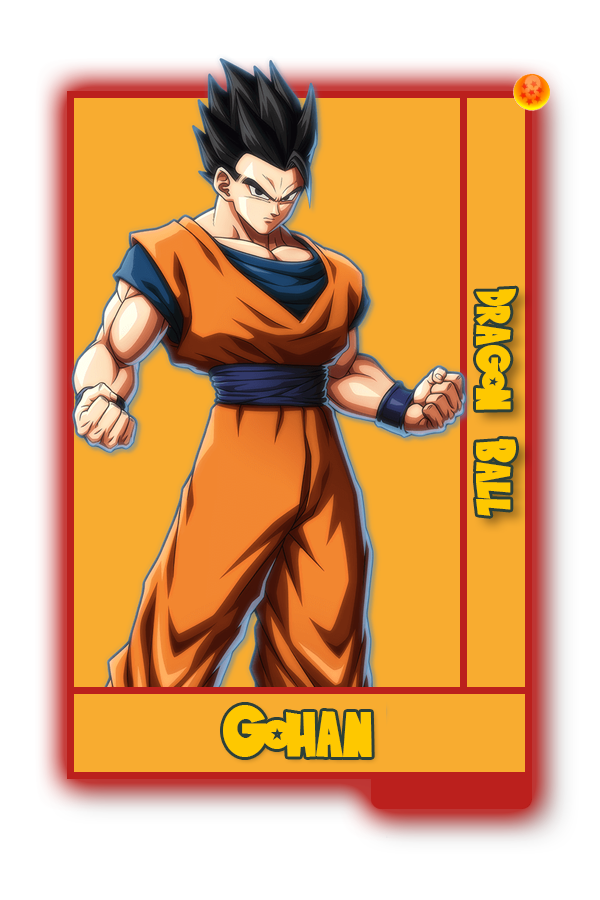
<style>
.page{position:relative;width:600px;height:900px;background:#f8ac30}
.page>*{position:absolute;margin:0}
.t1{font:56.9px "SaiyanSans";color:#fec800}
.t2{font:75px "SaiyanSans";color:#fec800}
</style>
<div class="page">
<p class="t1" style="left:476px;top:288px;width:40px;height:228px;rotate:90deg">Dragon Ball</p>
<p class="t2" style="left:223px;top:705px;width:149px;height:52px">Gohan</p>
</div>
